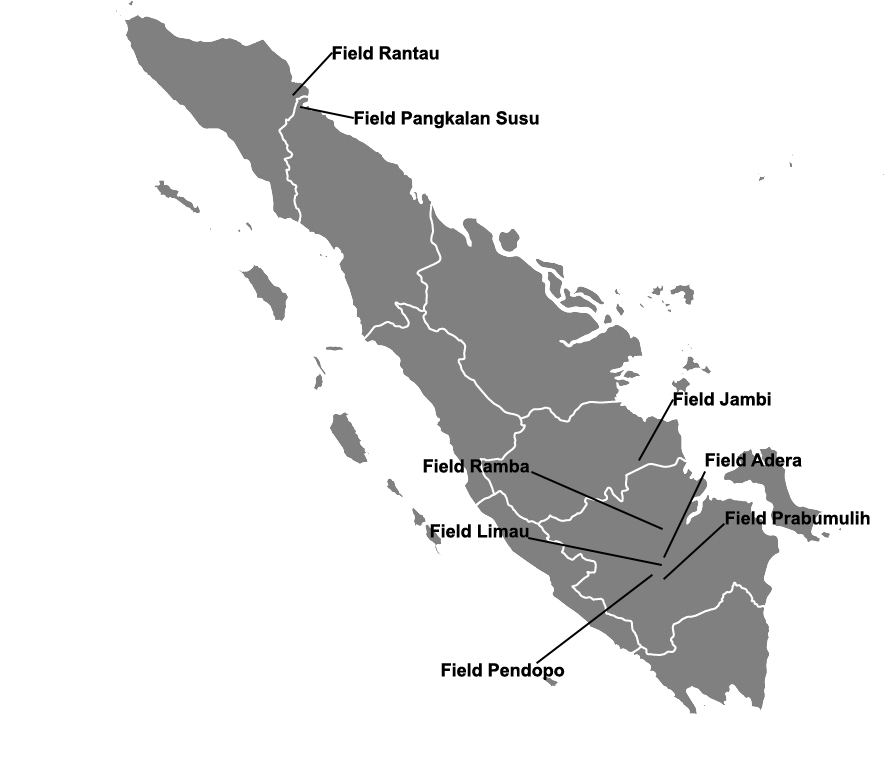
<style>
.page{position:relative;width:888px;height:764px;background:#ffffff}
.page>*{position:absolute;margin:0}
.t1{font:18px "Arial-BoldMT";color:#000000}
</style>
<div class="page">
<p class="t1" style="left:332px;top:46px;width:107px;height:14px">Field Rantau</p>
<p class="t1" style="left:354px;top:111px;width:185px;height:18px">Field Pangkalan Susu</p>
<p class="t1" style="left:673px;top:392px;width:98px;height:14px">Field Jambi</p>
<p class="t1" style="left:423px;top:459px;width:107px;height:14px">Field Ramba</p>
<p class="t1" style="left:705px;top:453px;width:97px;height:14px">Field Adera</p>
<p class="t1" style="left:725px;top:511px;width:145px;height:14px">Field Prabumulih</p>
<p class="t1" style="left:430px;top:524px;width:99px;height:14px">Field Limau</p>
<p class="t1" style="left:441px;top:663px;width:124px;height:17px">Field Pendopo</p>
</div>
